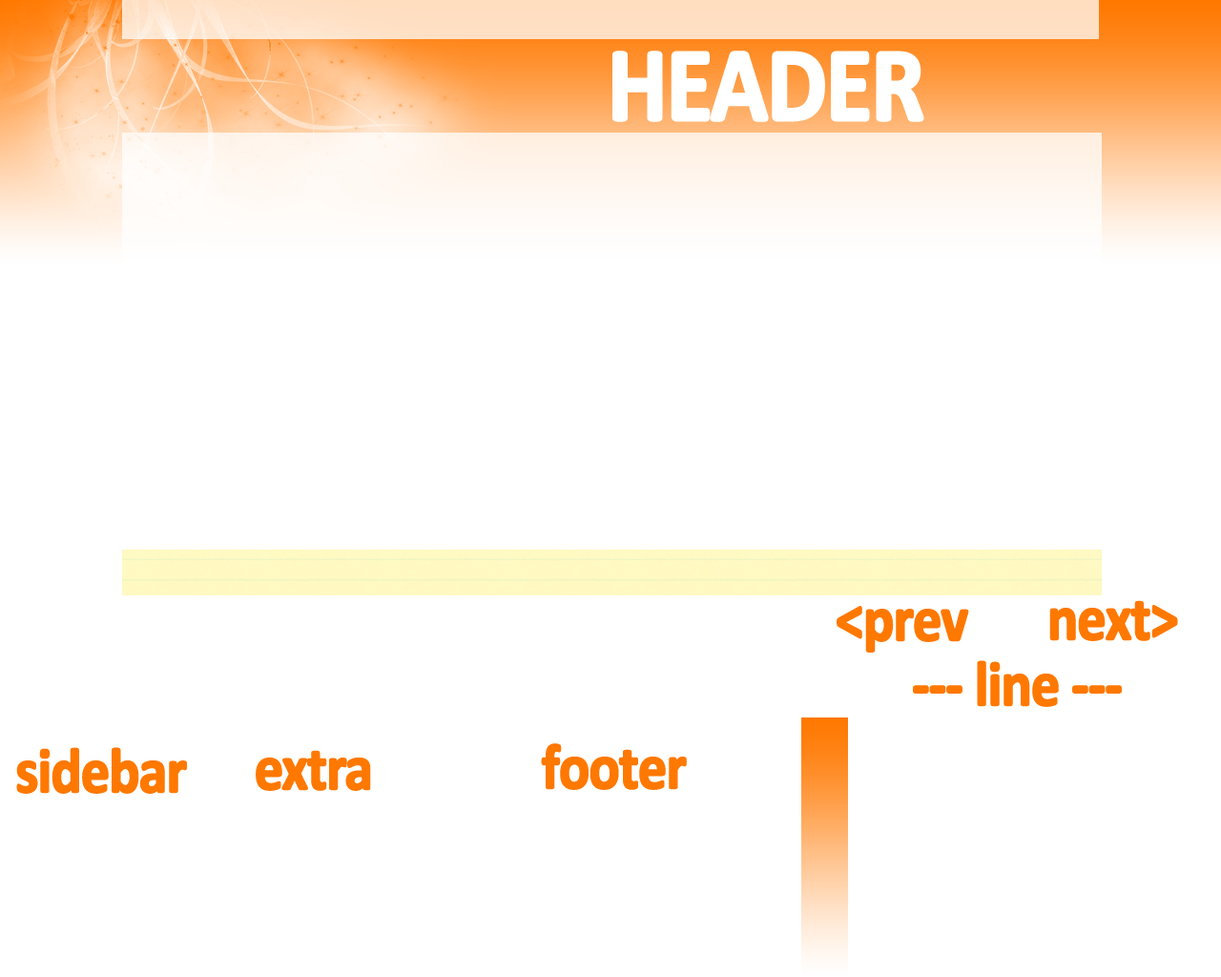
<style>
.page{position:relative;width:1221px;height:977px;background:#ffffff}
.page>*{position:absolute;margin:0}
.t1{font:106.8px "Calibri-Bold";letter-spacing:-0.04em;color:#ffffff;font-weight:bold;scale:0.89 1}
.t2{font:64.1px "Calibri-Bold";letter-spacing:-0.04em;color:#ff7800;font-weight:bold;scale:0.89 1}
</style>
<div class="page">
<p class="t1" style="left:612px;top:51px;width:312px;height:71px">HEADER</p>
<p class="t2" style="left:836px;top:606px;width:133px;height:46px">&lt;prev</p>
<p class="t2" style="left:1049px;top:600px;width:129px;height:41px">next&gt;</p>
<p class="t2" style="left:913px;top:660px;width:209px;height:47px">--- line ---</p>
<p class="t2" style="left:16px;top:747px;width:171px;height:47px">sidebar</p>
<p class="t2" style="left:256px;top:750px;width:115px;height:41px">extra</p>
<p class="t2" style="left:541px;top:743px;width:146px;height:47px">footer</p>
</div>
